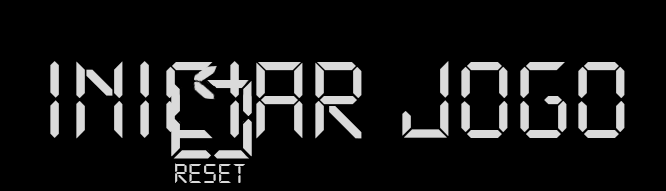
<style>
.page{position:relative;width:666px;height:191px;background:#000000}
.page>*{position:absolute;margin:0}
.t1{font:120px "DS-Digital";color:#dadada}
.t2{font:30px "DS-Digital";color:#dadada}
</style>
<div class="page">
<p class="t1" style="left:50px;top:61px;width:575px;height:78px">Iniciar Jogo</p>
<p class="t2" style="left:175px;top:163px;width:70px;height:20px">Reset</p>
</div>
